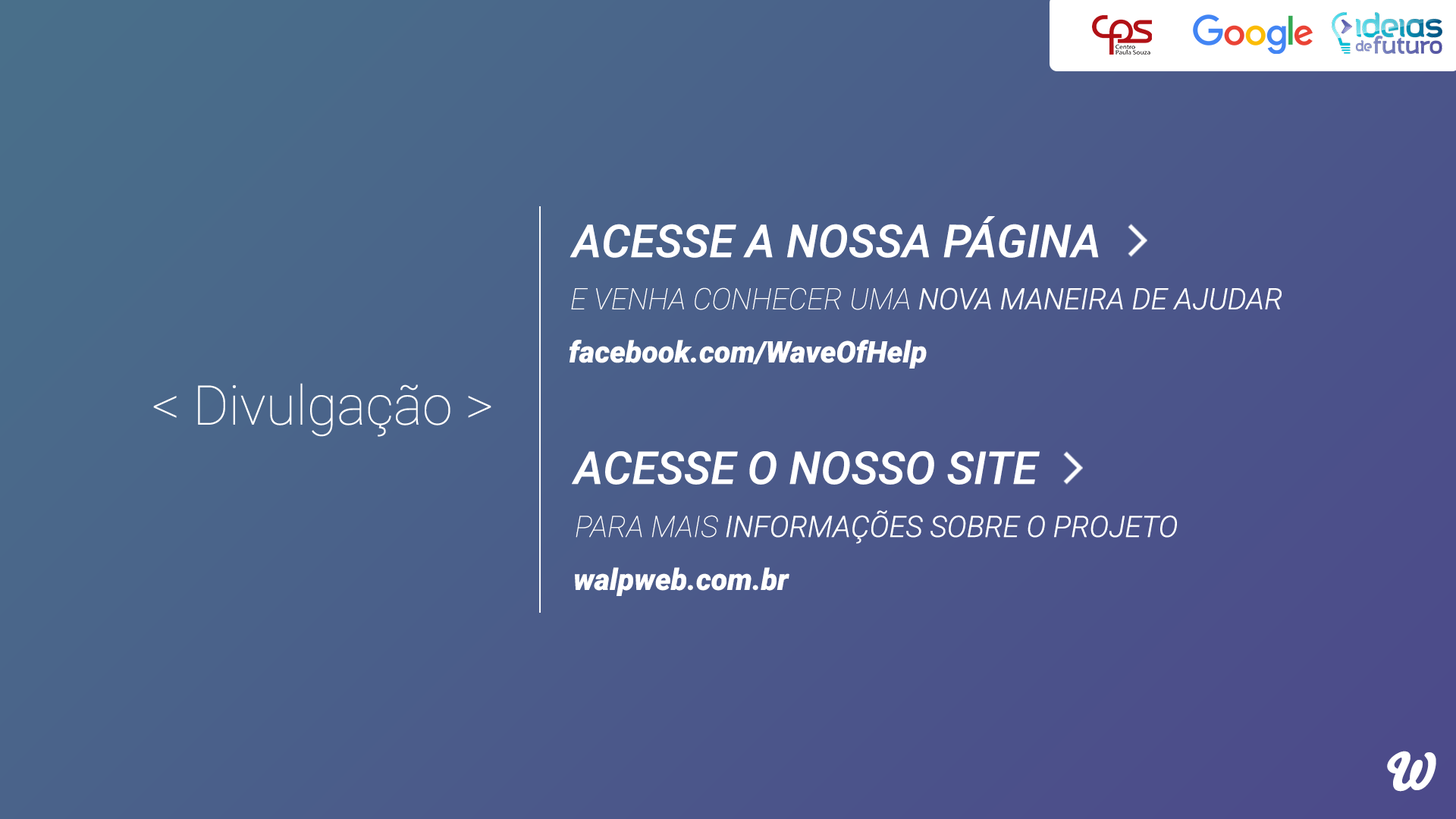
<style>
.page{position:relative;width:1456px;height:819px}
.page>*{position:absolute;margin:0}
.t1{font:45.4px "Roboto-MediumItalic";color:#ffffff}
.t2{font:29.6px "Roboto-LightItalic";color:#ffffff}
.t3{font:29.6px "Roboto-ThinItalic";color:#ffffff}
.t4{font:29.6px "Roboto-BlackItalic";color:#ffffff}
.t5{font:54.6px "Roboto-Thin";color:#ffffff}
.t6{font:45.3px "Roboto-MediumItalic";color:#ffffff}
.t7{font:50.8px "Bello-Pro";color:#ffffff}
</style>
<div class="page">
<p class="t1" style="left:570px;top:216px;width:529px;height:42px">ACESSE A NOSSA PÁGINA</p>
<p class="t2" style="left:571px;top:287px;width:711px;height:23px"><span class="t3">E VENHA CONHECER UMA </span>NOVA MANEIRA DE AJUDAR</p>
<p class="t4" style="left:569px;top:340px;width:358px;height:29px">facebook.com/WaveOfHelp</p>
<p class="t5" style="left:153px;top:383px;width:338px;height:54px">&lt; Divulgação &gt;</p>
<p class="t6" style="left:572px;top:451px;width:468px;height:34px">ACESSE O NOSSO SITE</p>
<p class="t2" style="left:576px;top:510px;width:601px;height:34px"><span class="t3">PARA MAIS </span>INFORMAÇÕES SOBRE O PROJETO</p>
<p class="t4" style="left:575px;top:567px;width:214px;height:29px">walpweb.com.br</p>
<p class="t7" style="left:1387px;top:751px;width:49px;height:41px">W</p>
</div>
